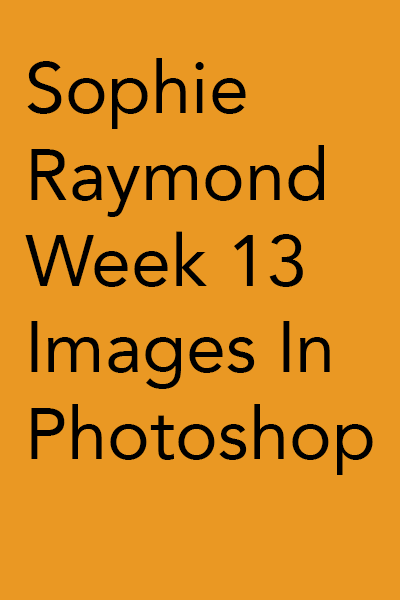
<style>
.page{position:relative;width:400px;height:600px;background:#ea9823}
.page>*{position:absolute;margin:0}
.t1{font:72px "Avenir-Roman";color:#000000}
</style>
<div class="page">
<p class="t1" style="left:25px;top:58px;width:348px;height:417px">Sophie Raymond<br>Week 13<br>Images In<br>Photoshop</p>
</div>
